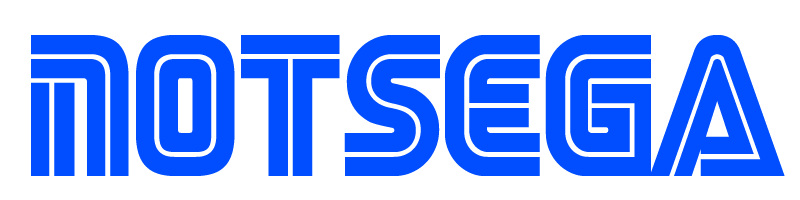
<style>
.page{position:relative;width:800px;height:200px;background:#ffffff}
.page>*{position:absolute;margin:0}
.t1{font:144px "SEGA";color:#004eff}
</style>
<div class="page">
<p class="t1" style="left:31px;top:35px;width:754px;height:141px">notsega</p>
</div>
